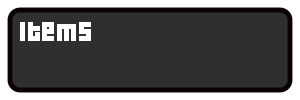
<style>
.page{position:relative;width:300px;height:100px;background:#2f2f2f}
.page>*{position:absolute;margin:0}
.t1{font:24px "04b19";letter-spacing:0.025em;color:#ffffff}
</style>
<div class="page">
<p class="t1" style="left:20px;top:22px;width:71px;height:19px">Items</p>
</div>
